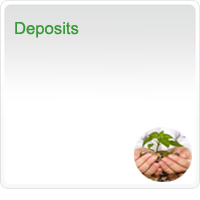
<style>
.page{position:relative;width:200px;height:200px;background:#ffffff}
.page>*{position:absolute;margin:0}
.t1{font:16.7px "ArialMT";color:#369a36}
</style>
<div class="page">
<p class="t1" style="left:15px;top:22px;width:64px;height:16px">Deposits</p>
</div>
